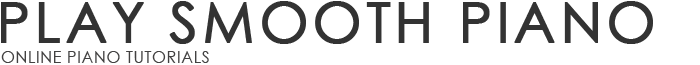
<style>
.page{position:relative;width:700px;height:65px;background:#ffffff}
.page>*{position:absolute;margin:0}
.t1{font:56px "CenturyGothic";letter-spacing:0.06em;color:#333333;font-weight:bold}
.t2{font:16px "CenturyGothic";letter-spacing:0.04em;color:#424141}
</style>
<div class="page">
<p class="t1" style="left:1px;top:1px;width:652px;height:43px">PLAY SMOOTH PIANO</p>
<p class="t2" style="left:1px;top:51px;width:208px;height:12px">ONLINE PIANO TUTORIALS</p>
</div>
